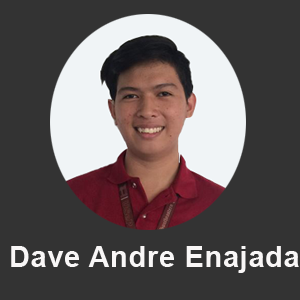
<style>
.page{position:relative;width:300px;height:300px;background:#333333}
.page>*{position:absolute;margin:0}
.t1{font:29.2px "Arial-BoldMT";letter-spacing:0.02em;color:#f9f7f7}
</style>
<div class="page">
<p class="t1" style="left:11px;top:246px;width:288px;height:27px">Dave Andre Enajada</p>
</div>
